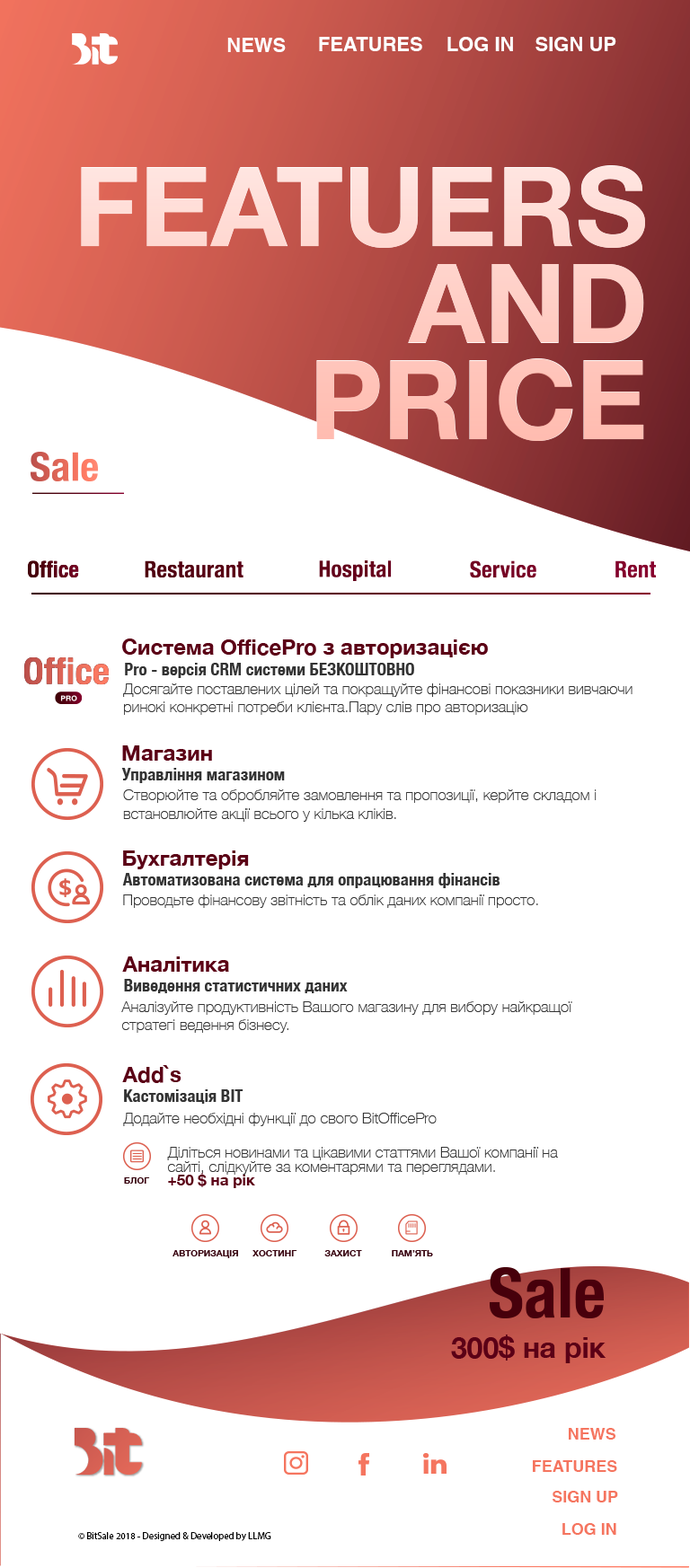
<style>
.page{position:relative;width:690px;height:1568px;background:#ffffff}
.page>*{position:absolute;margin:0}
.t1{font:19.8px "Helvetica-Bold";color:#ffffff;font-variant:small-caps}
.t2{font:21.6px "HelveticaNeue-Bold";color:#5b0016}
.t3{font:17.1px "HelveticaNeue-CondensedBold";color:#333333}
.t4{font:15.3px "HelveticaNeue-Thin";color:#333333}
.t5{font:15.3px/14px "HelveticaNeue-Thin";color:#333333}
.t6{font:15.3px/14px "HelveticaNeue-Bold";color:#5b0016}
.t7{font:9px "HelveticaNeue-Bold";color:#37020e}
.t8{font:16.2px "Helvetica-Bold";color:#f5755f;font-variant:small-caps}
.t9{font:9.6px "MyriadPro-Regular";color:#000000}
</style>
<div class="page">
<p class="t1" style="left:227px;top:38px;width:59px;height:14px">NEWS</p>
<p class="t1" style="left:319px;top:37px;width:103px;height:14px">FEATURES</p>
<p class="t1" style="left:447px;top:37px;width:66px;height:14px">LOG IN</p>
<p class="t1" style="left:535px;top:37px;width:81px;height:14px">SIGN UP</p>
<p class="t2" style="left:122px;top:639px;width:366px;height:19px">Система OfficePro з авторизацією</p>
<p class="t3" style="left:125px;top:663px;width:289px;height:15px">Pro - версія CRM системи БЕЗКОШТОВНО</p>
<p class="t4" style="left:123px;top:683px;width:509px;height:32px">Досягайте поставлених цілей та покращуйте фінансові показники вивчаючи ринокі конкретні потреби клієнта.Пару слів про авторизацію</p>
<p class="t2" style="left:122px;top:745px;width:90px;height:16px">Магазин</p>
<p class="t3" style="left:121px;top:768px;width:164px;height:15px">Управління магазином</p>
<p class="t4" style="left:123px;top:789px;width:473px;height:33px">Створюйте та обробляйте замовлення та пропозиції, керйте складом і встановлюйте акції всього у кілька кліків.</p>
<p class="t2" style="left:123px;top:850px;width:126px;height:19px">Бухгалтерія</p>
<p class="t3" style="left:122px;top:873px;width:378px;height:15px">Автоматизована система для опрацювання фінансів</p>
<p class="t4" style="left:123px;top:894px;width:415px;height:14px">Проводьте фінансову звітність та облік даних компанії просто.</p>
<p class="t2" style="left:122px;top:956px;width:107px;height:16px">Аналітика</p>
<p class="t3" style="left:124px;top:979px;width:224px;height:14px">Виведення статистичних даних</p>
<p class="t4" style="left:121px;top:1001px;width:451px;height:32px">Аналізуйте продуктивність Вашого магазину для вибору найкращої стратегі ведення бізнесу.</p>
<p class="t2" style="left:122px;top:1065px;width:59px;height:18px">Add`s</p>
<p class="t3" style="left:124px;top:1089px;width:119px;height:15px">Кастомізація ВІТ</p>
<p class="t4" style="left:123px;top:1113px;width:313px;height:13px">Додайте необхідні функції до свого BitOfficePro</p>
<p class="t4" style="left:167px;top:1147px;width:391px;height:41px">Діліться новинами та цікавими статтями Вашої компанії на <span class="t5">сайті, слідкуйте за коментарями та переглядами.<br></span><span class="t6">+50 $ на рік</span></p>
<p class="t7" style="left:124px;top:1177px;width:26px;height:7px">БЛОГ</p>
<p class="t7" style="left:172px;top:1250px;width:66px;height:8px">АВТОРИЗАЦІЯ</p>
<p class="t7" style="left:252px;top:1250px;width:45px;height:6px">ХОСТИНГ</p>
<p class="t7" style="left:324px;top:1250px;width:38px;height:6px">ЗАХИСТ</p>
<p class="t7" style="left:392px;top:1250px;width:41px;height:6px">ПАМ’ЯТЬ</p>
<p class="t8" style="left:568px;top:1428px;width:47px;height:12px">NEWS</p>
<p class="t8" style="left:533px;top:1460px;width:84px;height:12px">FEATURES</p>
<p class="t8" style="left:552px;top:1491px;width:66px;height:11px">SIGN UP</p>
<p class="t8" style="left:562px;top:1523px;width:54px;height:12px">LOG IN</p>
<p class="t9" style="left:78px;top:1532px;width:193px;height:9px">© BitSale 2018 - Designed &amp; Developed by LLMG</p>
</div>
